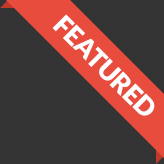
<style>
.page{position:relative;width:164px;height:164px;background:#333333}
.page>*{position:absolute;margin:0}
.t1{font:26px "Lato-Black";color:#ffffff;text-transform:uppercase}
</style>
<div class="page">
<p class="t1" style="left:52px;top:14px;width:103px;height:102px;rotate:45deg">FEATURED</p>
</div>
